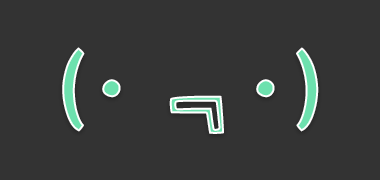
<style>
.page{position:relative;width:380px;height:180px;background:#333333}
.page>*{position:absolute;margin:0}
.t1{font:100px "KFhimaji";letter-spacing:-0.32em}
</style>
<div class="page">
<p class="t1" style="left:62px;top:47px;width:257px;height:87px">(・﹃º・)</p>
</div>
